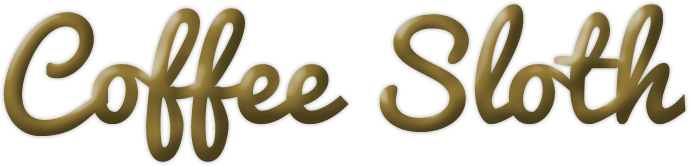
<style>
.page{position:relative;width:690px;height:166px;background:#ffffff}
.page>*{position:absolute;margin:0}
.t1{font:127.4px "Pacifico-Regular"}
</style>
<div class="page">
<p class="t1" style="left:3px;top:4px;width:683px;height:158px">Coffee Sloth</p>
</div>
